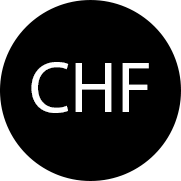
<style>
.page{position:relative;width:181px;height:181px;background:#000000}
.page>*{position:absolute;margin:0}
.t1{font:72px "MyriadHebrew-Regular";color:#ffffff}
</style>
<div class="page">
<p class="t1" style="left:31px;top:62px;width:118px;height:51px">CHF</p>
</div>
